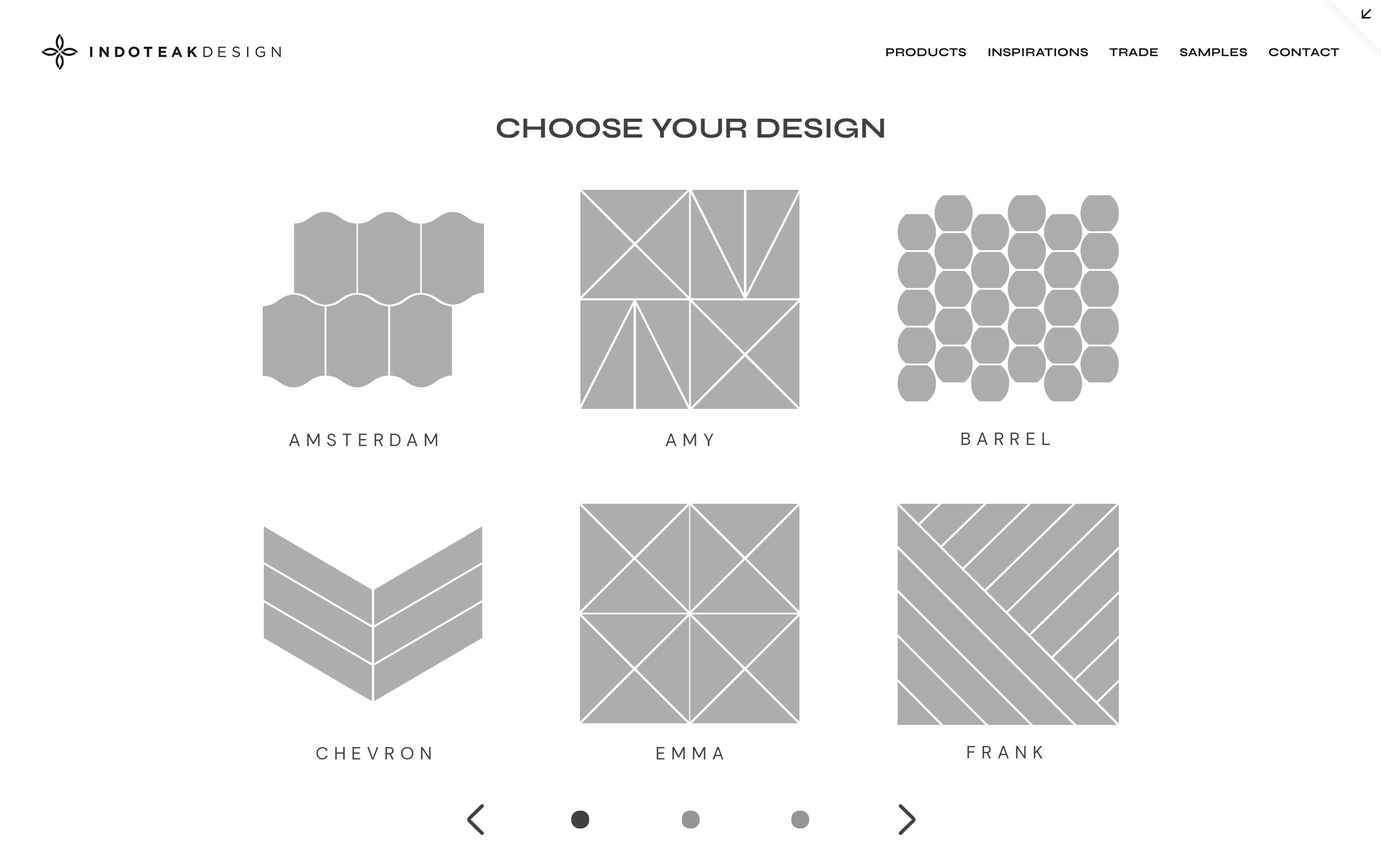
<style>
.page{position:relative;width:1381px;height:863px;background:#ffffff}
.page>*{position:absolute;margin:0}
.t1{font:29.2px "Syne-Bold";color:#404041}
.t2{font:18.2px "DMSans-Regular";letter-spacing:0.3em;color:#404041}
.t3{font:17.9px "DMSans-Regular";letter-spacing:0.3em;color:#404041}
</style>
<div class="page">
<p class="t1" style="left:496px;top:118px;width:388px;height:20px">CHOOSE YOUR DESIGN</p>
<p class="t2" style="left:289px;top:434px;width:149px;height:12px">AMSTERDAM</p>
<p class="t2" style="left:666px;top:434px;width:48px;height:12px">AMY</p>
<p class="t2" style="left:961px;top:433px;width:89px;height:12px">BARREL</p>
<p class="t3" style="left:316px;top:747px;width:115px;height:13px">CHEVRON</p>
<p class="t3" style="left:657px;top:747px;width:67px;height:13px">EMMA</p>
<p class="t3" style="left:967px;top:746px;width:76px;height:13px">FRANK</p>
</div>
